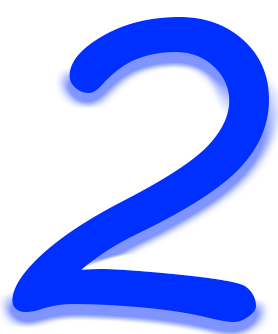
<style>
.page{position:relative;width:278px;height:334px;background:#ffffff}
.page>*{position:absolute;margin:0}
.t1{font:416.7px "MVBoli";color:#0030ff}
</style>
<div class="page">
<p class="t1" style="left:12px;top:17px;width:257px;height:305px">2</p>
</div>
